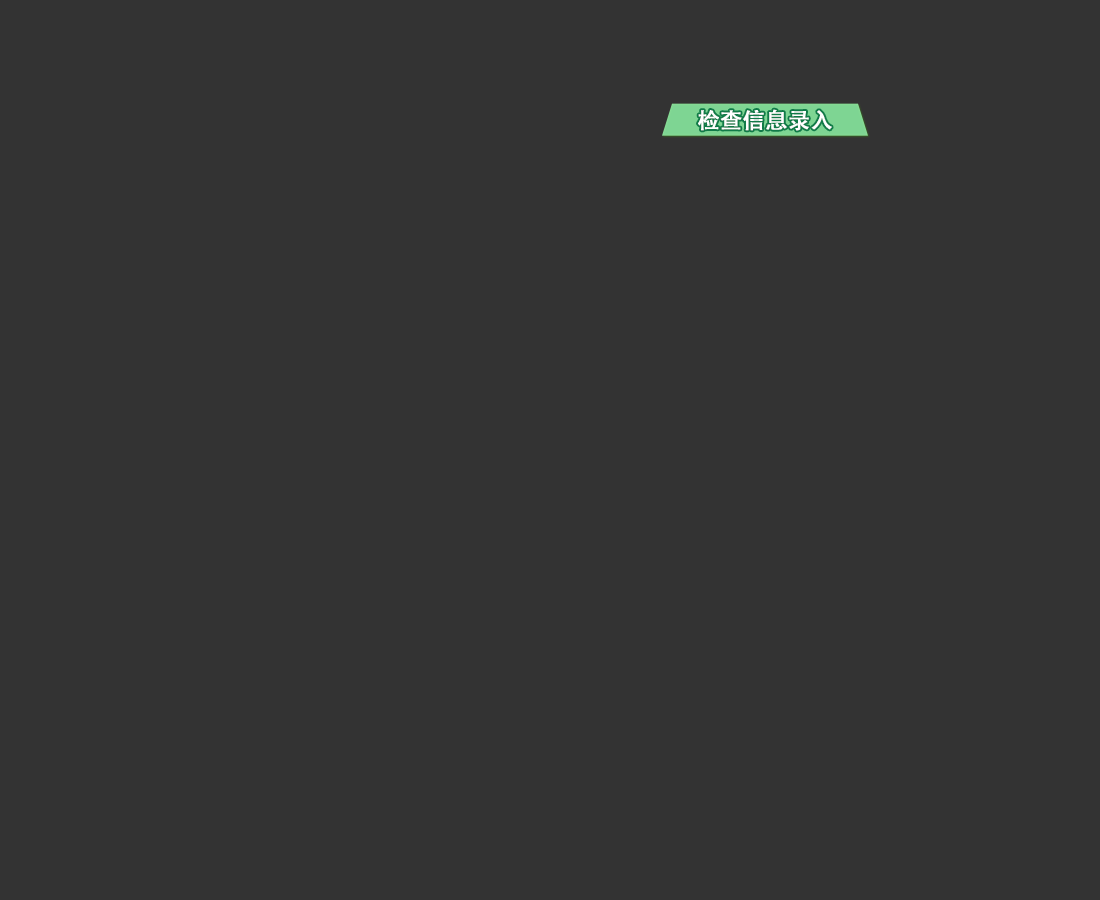
<style>
.page{position:relative;width:1100px;height:900px;background:#333333}
.page>*{position:absolute;margin:0}
.t1{font:22px "STHeiti";color:#ffffff;font-weight:bold}
</style>
<div class="page">
<p class="t1" style="left:698px;top:109px;width:134px;height:22px">检查信息录入</p>
</div>
